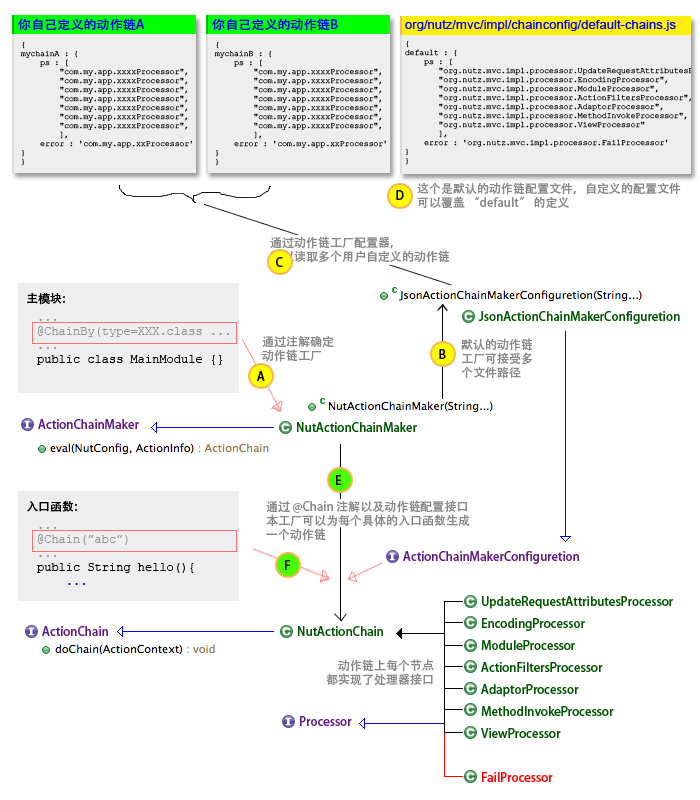
<style>
.page{position:relative;width:700px;height:800px;background:#ffffff}
.page>*{position:absolute;margin:0}
.t1{font:12px "AdobeHeitiStd-Regular";color:#0000ff;scale:1.09 1}
.t2{font:12px "ArialMT";color:#0000ff;scale:1.09 1}
.t3{font:8px/9px "CourierNewPSMT";color:#000000}
.t4{font:12px/14px "AdobeHeitiStd-Regular";color:#898989}
.t5{font:12px "AdobeHeitiStd-Regular";color:#000000}
.t6{font:12px "AdobeHeitiStd-Regular";color:#005500}
.t7{font:12px/14px "CourierNewPSMT";color:#959595}
.t8{font:12px/14px "CourierNewPSMT";color:#000000}
.t9{font:12px "AdobeHeitiStd-Regular";color:#601986}
.t10{font:12px/14px "CourierNewPSMT";color:#0000ff}
.t11{font:12px/22px "AdobeHeitiStd-Regular";color:#005500}
.t12{font:12px/22px "AdobeHeitiStd-Regular";color:#ff0000}
</style>
<div class="page">
<p class="t1" style="left:18px;top:18px;width:127px;height:13px">你自己定义的动作链A</p>
<p class="t1" style="left:212px;top:18px;width:126px;height:13px">你自己定义的动作链B</p>
<p class="t2" style="left:405px;top:20px;width:271px;height:11px">org/nutz/mvc/impl/chainconfig/default-chains.js</p>
<p class="t3" style="left:20px;top:42px;width:172px;height:124px">{<br>mychainA : {<br>    ps : [<br>        "com.my.app.xxxxProcessor",<br>        "com.my.app.xxxxProcessor",<br>        "com.my.app.xxxxProcessor",<br>        "com.my.app.xxxxProcessor",<br>        "com.my.app.xxxxProcessor",<br>        "com.my.app.xxxxProcessor",<br>        "com.my.app.xxxxProcessor",<br>        ],<br>    error : 'com.my.app.xxProcessor'<br>}<br>}</p>
<p class="t3" style="left:214px;top:42px;width:172px;height:124px">{<br>mychainB : {<br>    ps : [<br>        "com.my.app.xxxxProcessor",<br>        "com.my.app.xxxxProcessor",<br>        "com.my.app.xxxxProcessor",<br>        "com.my.app.xxxxProcessor",<br>        "com.my.app.xxxxProcessor",<br>        "com.my.app.xxxxProcessor",<br>        "com.my.app.xxxxProcessor",<br>        ],<br>    error : 'com.my.app.xxProcessor'<br>}<br>}</p>
<p class="t4" style="left:417px;top:182px;width:264px;height:26px">这个是默认的动作链配置文件，自定义的配置文件<br>可以覆盖 “default” 的定义</p>
<p class="t5" style="left:396px;top:190px;width:8px;height:10px">D</p>
<p class="t4" style="left:270px;top:236px;width:180px;height:27px">通过动作链工厂配置器，<br>可以读取多个用户自定义的动作链</p>
<p class="t5" style="left:276px;top:257px;width:7px;height:10px">C</p>
<p class="t5" style="left:27px;top:292px;width:38px;height:13px">主模块:</p>
<p class="t6" style="left:478px;top:311px;width:202px;height:13px">JsonActionChainMakerConfiguretion</p>
<p class="t7" style="left:37px;top:319px;width:192px;height:46px">...<br>@ChainBy(type=XXX.class ...<br>...<br><span class="t8">public class MainModule {}</span></p>
<p class="t4" style="left:262px;top:335px;width:72px;height:27px">通过注解确定<br>动作链工厂</p>
<p class="t4" style="left:461px;top:338px;width:72px;height:41px">默认的动作链<br>工厂可接受多<br>个文件路径</p>
<p class="t5" style="left:439px;top:349px;width:7px;height:10px">B</p>
<p class="t5" style="left:257px;top:371px;width:8px;height:10px">A</p>
<p class="t9" style="left:38px;top:419px;width:101px;height:10px">ActionChainMaker</p>
<p class="t6" style="left:297px;top:422px;width:120px;height:10px">NutActionChainMaker</p>
<p class="t5" style="left:336px;top:475px;width:6px;height:10px">E</p>
<p class="t5" style="left:27px;top:501px;width:50px;height:11px">入口函数:</p>
<p class="t4" style="left:266px;top:500px;width:204px;height:41px">通过 @Chain 注解以及动作链配置接口<br>本工厂可以为每个具体的入口函数生成<br>一个动作链</p>
<p class="t8" style="left:37px;top:527px;width:157px;height:58px"><span class="t7">...<br>@Chain(”abc”)<br>...<br></span>public String hello(){<br><span class="t10">    ...</span></p>
<p class="t9" style="left:403px;top:551px;width:176px;height:13px">ActionChainMakerConfiguretion</p>
<p class="t5" style="left:285px;top:560px;width:5px;height:10px">F</p>
<p class="t11" style="left:481px;top:596px;width:192px;height:186px">UpdateRequestAttributesProcessor<br>EncodingProcessor<br>ModuleProcessor<br>ActionFiltersProcessor<br>AdaptorProcessor<br>MethodInvokeProcessor<br>ViewProcessor<br><br><span class="t12">FailProcessor</span></p>
<p class="t9" style="left:42px;top:626px;width:66px;height:10px">ActionChain</p>
<p class="t6" style="left:298px;top:626px;width:85px;height:10px">NutActionChain</p>
<p class="t4" style="left:326px;top:659px;width:108px;height:27px;text-align:right">动作链上每个节点<br>都实现了处理器接口</p>
<p class="t9" style="left:300px;top:716px;width:52px;height:10px">Processor</p>
</div>
